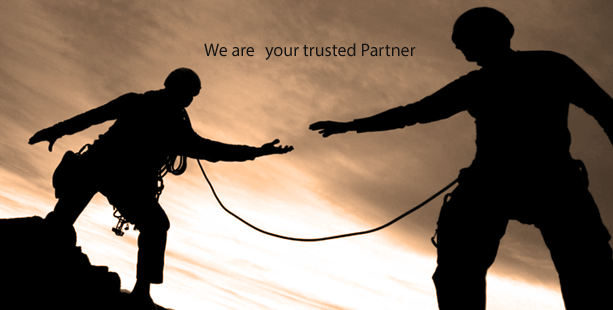
<style>
.page{position:relative;width:613px;height:310px;background:#000000}
.page>*{position:absolute;margin:0}
.t1{font:18px "MyriadPro-Regular";color:#131313}
</style>
<div class="page">
<p class="t1" style="left:204px;top:43px;width:212px;height:17px">We are your trusted Partner</p>
</div>
